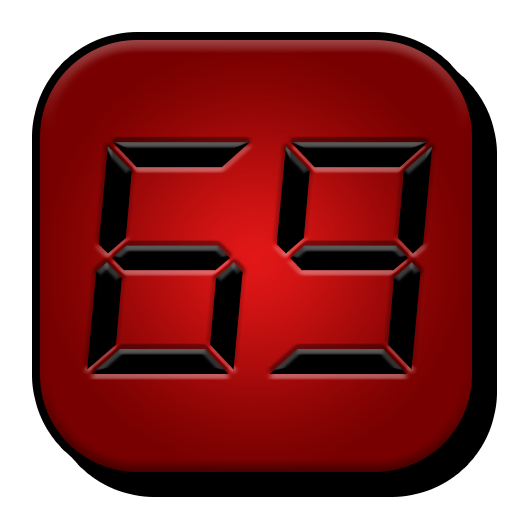
<style>
.page{position:relative;width:512px;height:512px;background:#ffffff}
.page>*{position:absolute;margin:0}
.t1{font:364.6px "DS-Digital-Italic";letter-spacing:-0.025em;color:#000000;text-transform:uppercase;scale:1.05 1}
</style>
<div class="page">
<p class="t1" style="left:87px;top:142px;width:346px;height:232px">69</p>
</div>
